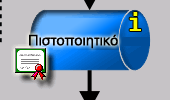
<style>
.page{position:relative;width:170px;height:100px;background:#c6c3c6}
.page>*{position:absolute;margin:0}
.t1{font:14.7px "ArialMT";color:#000000}
</style>
<div class="page">
<p class="t1" style="left:29px;top:34px;width:89px;height:15px">Πιστοποιητικό</p>
</div>
